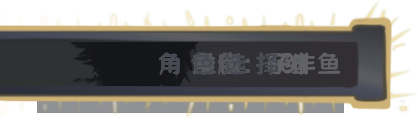
<style>
.page{position:relative;width:418px;height:137px;background:#ffffff}
.page>*{position:absolute;margin:0}
.t1{font:25px "MaokenZhuyuanTi-Regular";letter-spacing:0.3em;color:#474a52}
.t2{font:25px "MaokenZhuyuanTi-Regular";color:#56565d}
.t3{font:25px "MaokenZhuyuanTi-Regular";color:#616265}
</style>
<div class="page">
<p class="t1" style="left:159px;top:52px;width:120px;height:23px">角色选择</p>
<p class="t1" style="left:159px;top:52px;width:120px;height:23px">角色选择</p>
<p class="t2" style="left:192px;top:52px;width:103px;height:23px">难度：10</p>
<p class="t2" style="left:193px;top:52px;width:115px;height:23px">卡包：6组</p>
<p class="t3" style="left:193px;top:52px;width:147px;height:23px">角色：子非鱼</p>
</div>
